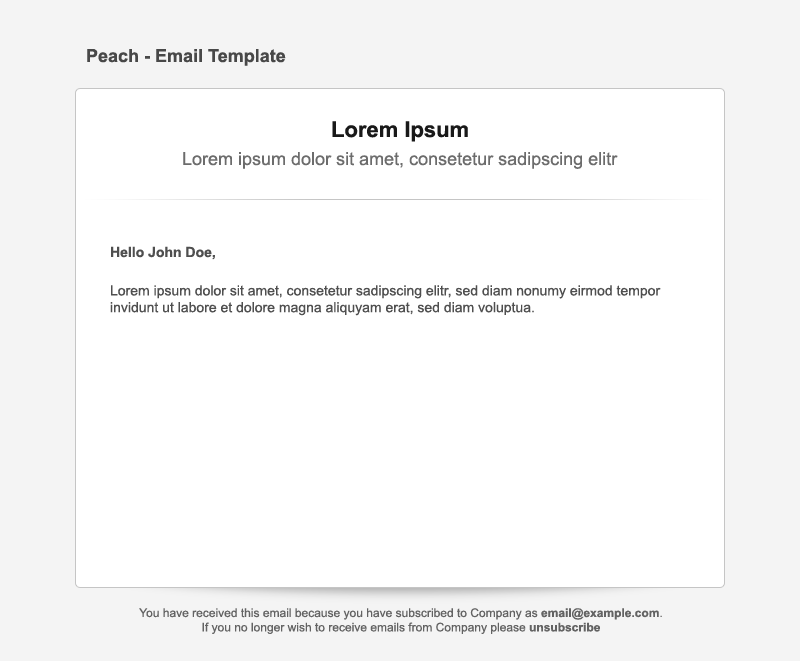
<style>
.page{position:relative;width:800px;height:661px;background:#ffffff}
.page>*{position:absolute;margin:0}
.t1{font:18px "Arial-BoldMT";color:#484848}
.t2{font:22px "Arial-BoldMT";color:#191919}
.t3{font:18px "ArialMT";color:#6c6c6c}
.t4{font:14px "ArialMT";color:#4f4f4f}
.t5{font:14px "Arial-BoldMT";color:#4f4f4f}
.t6{font:12px "ArialMT";color:#636363}
.t7{font:12px "Arial-BoldMT";color:#636363}
</style>
<div class="page">
<p class="t1" style="left:87px;top:49px;width:199px;height:17px">Peach - Email Template</p>
<p class="t2" style="left:332px;top:121px;width:136px;height:21px">Lorem Ipsum</p>
<p class="t3" style="left:183px;top:152px;width:435px;height:17px">Lorem ipsum dolor sit amet, consetetur sadipscing elitr</p>
<p class="t4" style="left:110px;top:246px;width:551px;height:70px"><span class="t5">Hello John Doe,<br><br></span>Lorem ipsum dolor sit amet, consetetur sadipscing elitr, sed diam nonumy eirmod tempor<br>invidunt ut labore et dolore magna aliquyam erat, sed diam voluptua.</p>
<p class="t6" style="left:139px;top:608px;width:523px;height:26px;text-align:center">You have received this email because you have subscribed to Company as <span class="t7">email@example.com</span>.<br>If you no longer wish to receive emails from Company please <span class="t7">unsubscribe</span></p>
</div>
